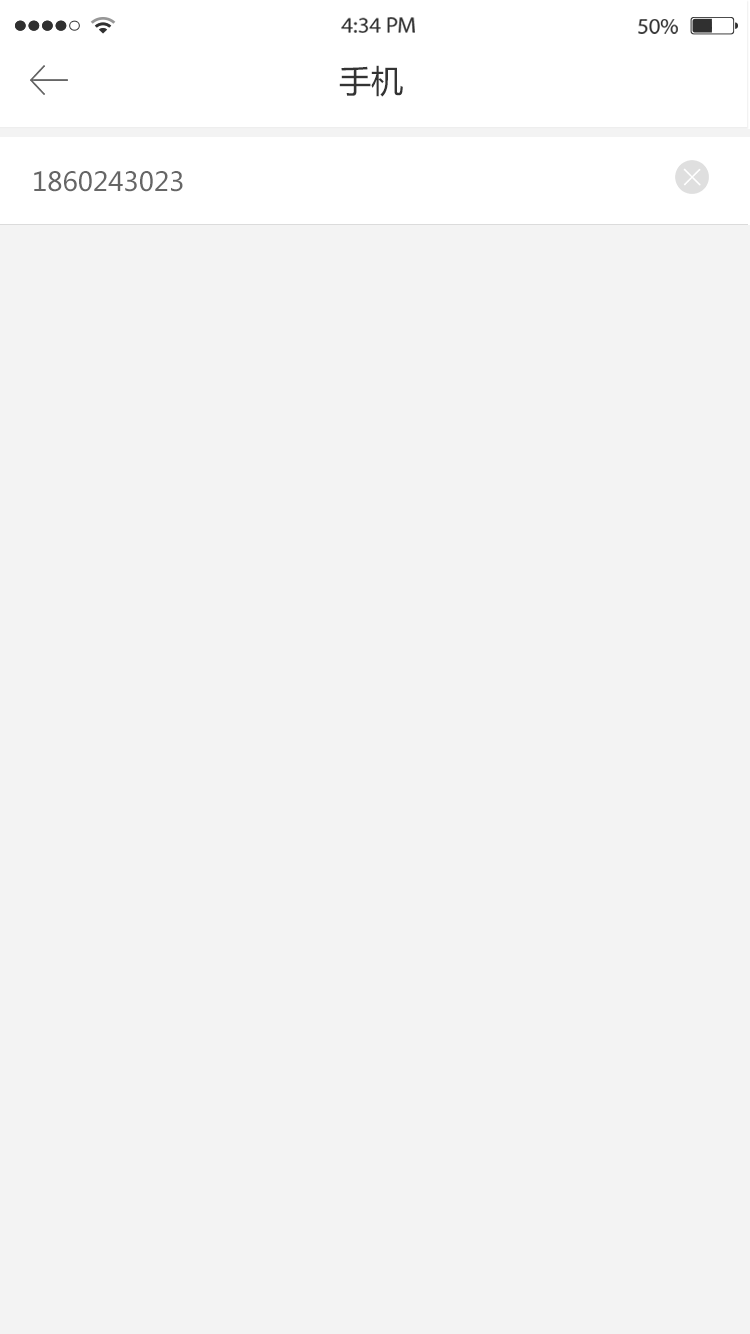
<style>
.page{position:relative;width:750px;height:1334px;background:#f3f3f3}
.page>*{position:absolute;margin:0}
.t1{font:22px "MyriadPro-Regular";color:#303030;scale:1.06 1}
.t2{font:22px "MyriadPro-Regular";color:#323232;scale:1.06 1}
.t3{font:32px "MicrosoftYaHei";color:#333333}
.t4{font:26px "MicrosoftYaHei";color:#666666}
</style>
<div class="page">
<p class="t1" style="left:341px;top:17px;width:74px;height:16px">4:34 PM</p>
<p class="t2" style="left:638px;top:19px;width:40px;height:15px">50%</p>
<p class="t3" style="left:339px;top:65px;width:64px;height:32px">手机</p>
<p class="t4" style="left:34px;top:171px;width:149px;height:21px">1860243023</p>
</div>
